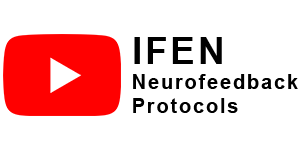
<style>
.page{position:relative;width:300px;height:150px;background:#ffffff}
.page>*{position:absolute;margin:0}
.t1{font:20.4px "Arial-BoldMT";letter-spacing:0.08em;color:#000000}
.t2{font:36.7px "Arial-BoldMT";letter-spacing:0.08em;color:#000000}
</style>
<div class="page">
<p class="t1" style="left:133px;top:37px;width:165px;height:76px"><span class="t2">IFEN<br></span>Neurofeedback<br>Protocols</p>
</div>
